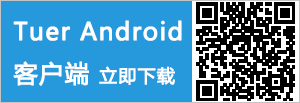
<style>
.page{position:relative;width:300px;height:103px;background:#2599dc}
.page>*{position:absolute;margin:0}
.t1{font:12px "MicrosoftYaHei";letter-spacing:0.04em;color:#ffffff;font-weight:bold}
.t2{font:18px "MicrosoftYaHei";letter-spacing:0.04em;color:#ffffff;font-weight:bold}
</style>
<div class="page">
<p class="t1" style="left:13px;top:20px;width:169px;height:66px">Tuer Android<br>客户端 <span class="t2">立即下载</span></p>
</div>
